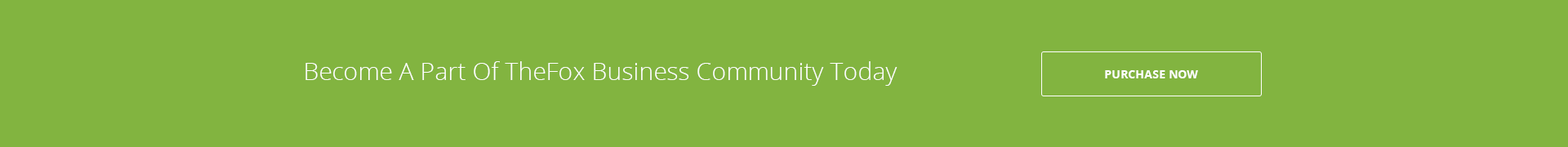
<style>
.page{position:relative;width:1568px;height:147px;background:#82b440}
.page>*{position:absolute;margin:0}
.t1{font:24.5px "OpenSans-Light";color:#ffffff}
.t2{font:11.4px "OpenSans-Bold";color:#ffffff}
</style>
<div class="page">
<p class="t1" style="left:305px;top:61px;width:593px;height:25px">Become A Part Of TheFox Business Community Today</p>
<p class="t2" style="left:1105px;top:70px;width:93px;height:8px">PURCHASE NOW</p>
</div>
